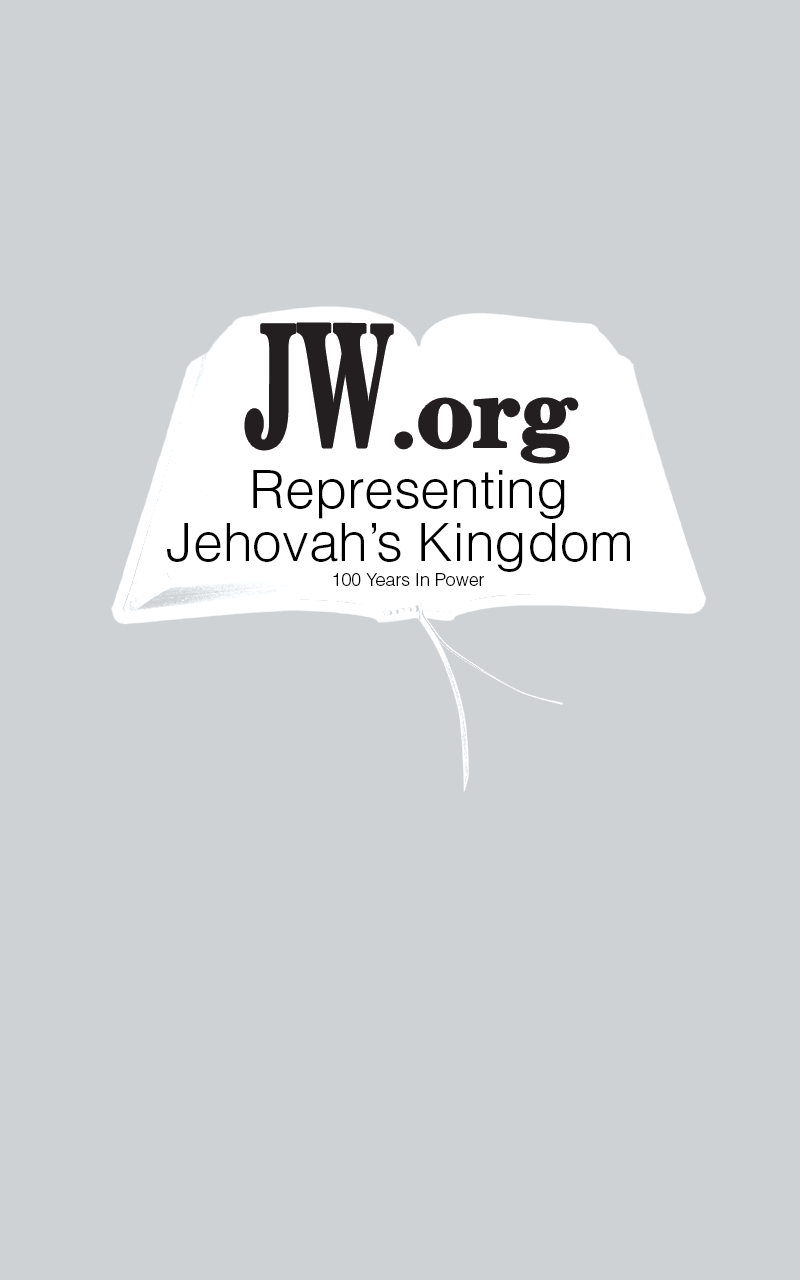
<style>
.page{position:relative;width:800px;height:1280px;background:#cfd2d4}
.page>*{position:absolute;margin:0}
.t1{font:53.4px "Helvetica-Light";color:#000000}
.t2{font:17.8px "Helvetica-Light";color:#000000}
</style>
<div class="page">
<p class="t1" style="left:253px;top:470px;width:312px;height:49px">Representing</p>
<p class="t1" style="left:167px;top:523px;width:463px;height:49px">Jehovah’s Kingdom</p>
<p class="t2" style="left:333px;top:573px;width:151px;height:13px">100 Years In Power</p>
</div>
